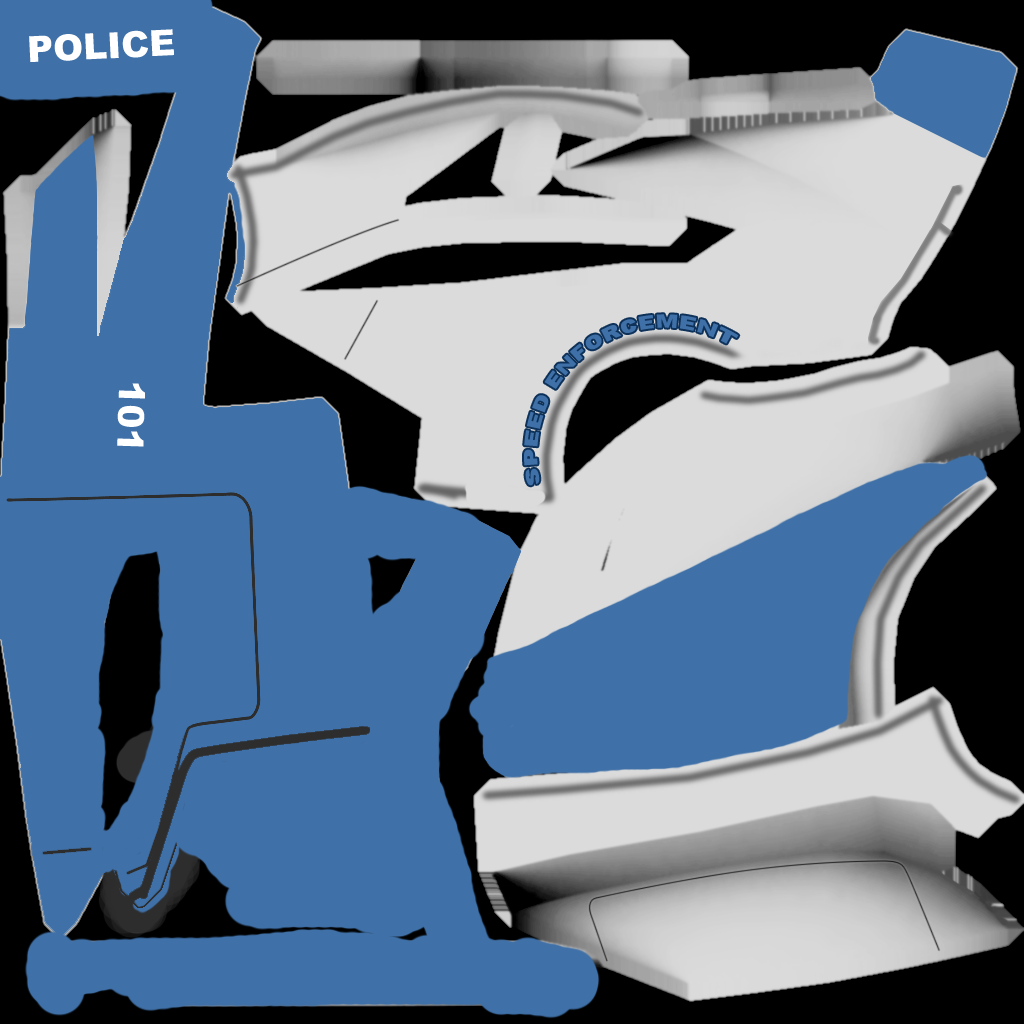
<style>
.page{position:relative;width:1024px;height:1024px;background:#3f70a7}
.page>*{position:absolute;margin:0}
.t1{font:36px "Arial-Black";color:#ffffff}
</style>
<div class="page">
<p class="t1" style="left:29px;top:29px;width:145px;height:33px;rotate:-3deg">POLICE</p>
<p class="t1" style="left:117px;top:383px;width:28px;height:64px;rotate:92deg">101</p>
</div>
